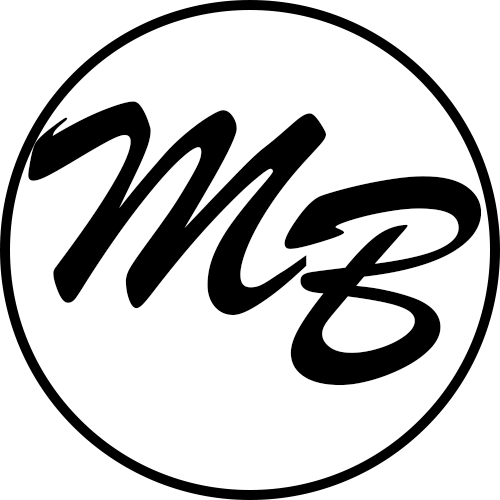
<style>
.page{position:relative;width:500px;height:500px;background:#ffffff}
.page>*{position:absolute;margin:0}
.t1{font:312.5px "BrushScriptMT";color:#000000}
</style>
<div class="page">
<p class="t1" style="left:28px;top:101px;width:298px;height:214px">M</p>
<p class="t1" style="left:284px;top:176px;width:197px;height:210px">B</p>
</div>
